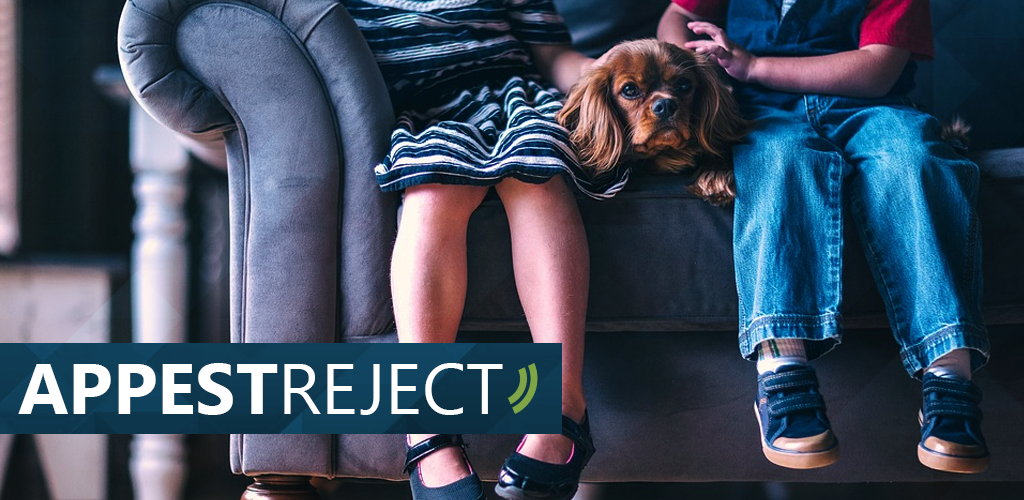
<style>
.page{position:relative;width:1024px;height:500px}
.page>*{position:absolute;margin:0}
.t1{font:72px "NirmalaUI-Bold";color:#ffffff}
.t2{font:72px "NirmalaUI";color:#ffffff}
</style>
<div class="page">
<p class="t1" style="left:18px;top:363px;width:485px;height:52px">APPEST<span class="t2">REJECT</span></p>
</div>
